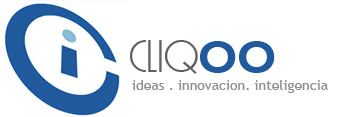
<style>
.page{position:relative;width:341px;height:117px;background:#ffffff}
.page>*{position:absolute;margin:0}
.t1{font:48px "ARBONNIE";color:#626161}
.t2{font:55px "CopperplateGothic-Bold";color:#215a9c}
.t3{font:14px "TrebuchetMS";color:#919090}
</style>
<div class="page">
<p class="t1" style="left:130px;top:40px;width:145px;height:34px">cliq<span class="t2">oo</span></p>
<p class="t3" style="left:132px;top:80px;width:196px;height:13px">ideas . innovacion. inteligencia</p>
</div>
